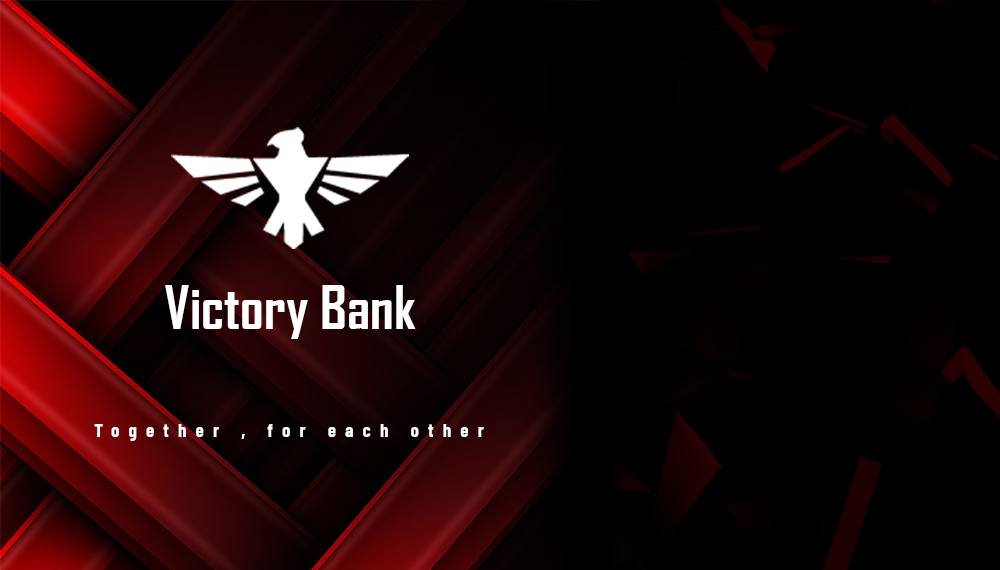
<style>
.page{position:relative;width:1000px;height:570px;background:#000000}
.page>*{position:absolute;margin:0}
.t1{font:58px "AgencyFB-Bold";color:#ffffff}
.t2{font:19px "BarlowCondensed-Bold";letter-spacing:0.48em;color:#ffffff}
</style>
<div class="page">
<p class="t1" style="left:165px;top:285px;width:251px;height:54px">Victory Bank</p>
<p class="t2" style="left:94px;top:424px;width:390px;height:17px">Together , for each other</p>
</div>
